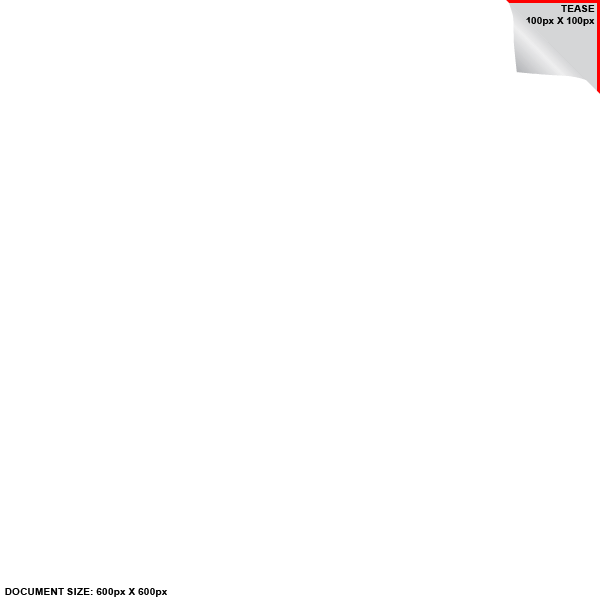
<style>
.page{position:relative;width:600px;height:600px;background:#ffffff}
.page>*{position:absolute;margin:0}
.t1{font:10px "Arial-BoldMT";color:#000000}
.t2{font:10px "Arial-BoldMT";color:#000000;text-transform:uppercase}
</style>
<div class="page">
<p class="t1" style="left:526px;top:5px;width:69px;height:21px;text-align:right"><span class="t2">Tease<br></span>100px X 100px</p>
<p class="t2" style="left:5px;top:588px;width:162px;height:9px">Document size:<span class="t1"> 600px X 600px</span></p>
</div>
